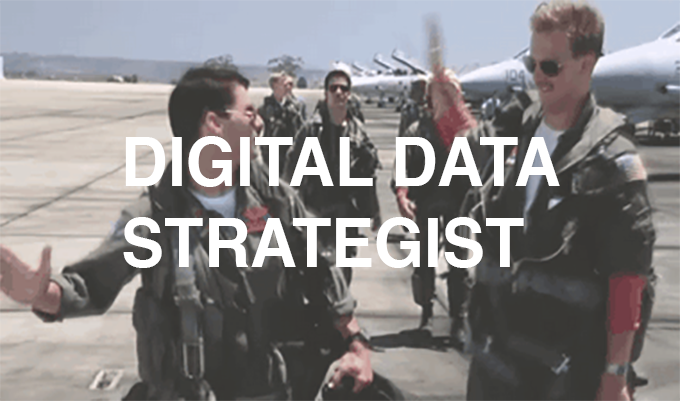
<style>
.page{position:relative;width:680px;height:401px}
.page>*{position:absolute;margin:0}
.t1{font:67.5px "Helvetica-Bold";color:#ffffff;scale:0.95 1}
</style>
<div class="page">
<p class="t1" style="left:123px;top:136px;width:437px;height:132px">DIGITAL DATA<br>STRATEGIST</p>
</div>
